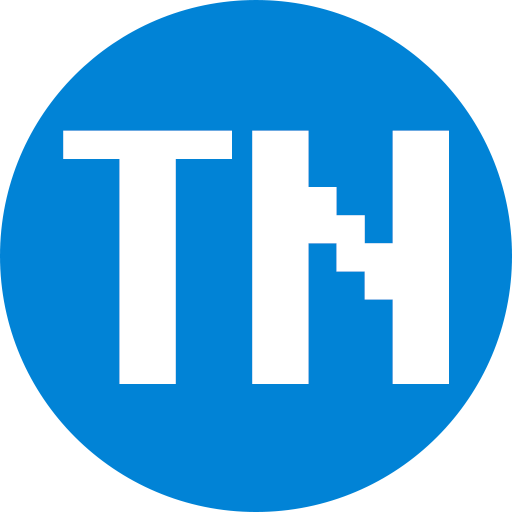
<style>
.page{position:relative;width:512px;height:512px;background:#0183d6}
.page>*{position:absolute;margin:0}
.t1{font:360px "Fixedsys";color:#ffffff}
</style>
<div class="page">
<p class="t1" style="left:63px;top:130px;width:169px;height:254px">T</p>
<p class="t1" style="left:252px;top:130px;width:197px;height:254px">N</p>
</div>
